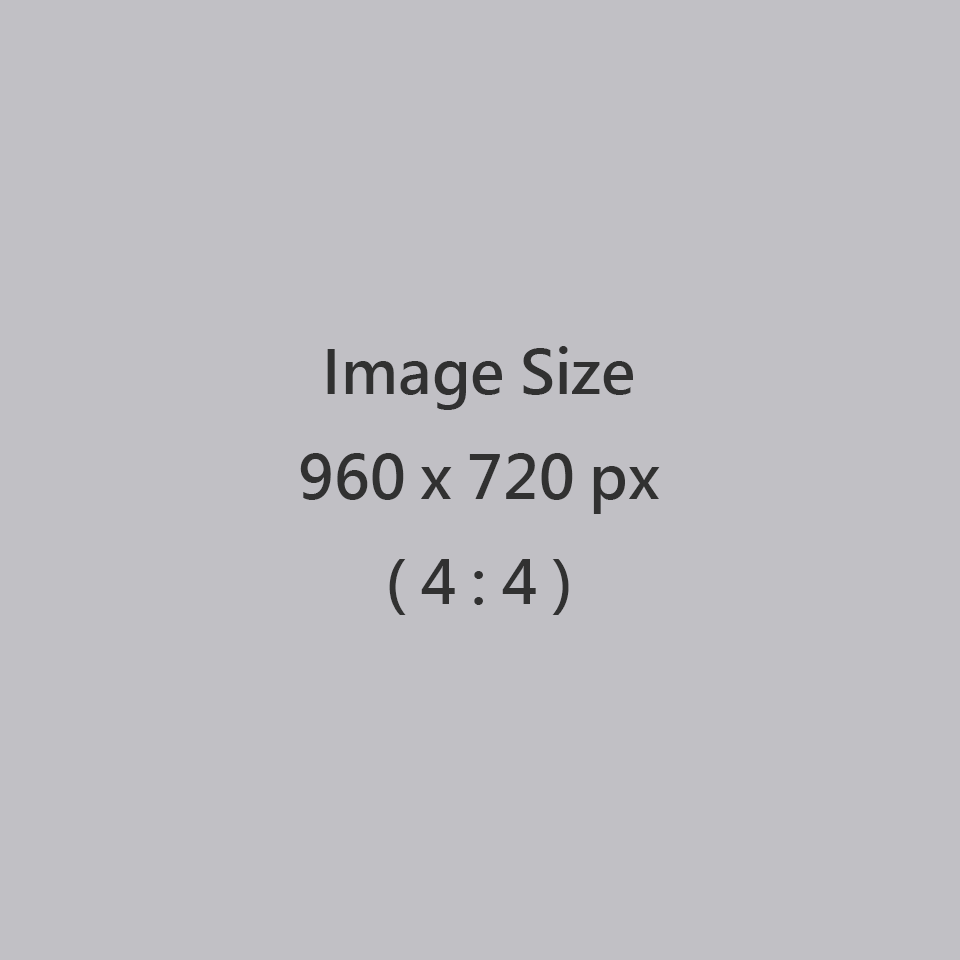
<style>
.page{position:relative;width:960px;height:960px;background:#c1c0c5}
.page>*{position:absolute;margin:0}
.t1{font:60px "MicrosoftJhengHeiBold";color:#313131}
</style>
<div class="page">
<p class="t1" style="left:300px;top:346px;width:360px;height:269px;text-align:center">Image Size<br>960 x 720 px<br>( 4 : 4 )</p>
</div>
